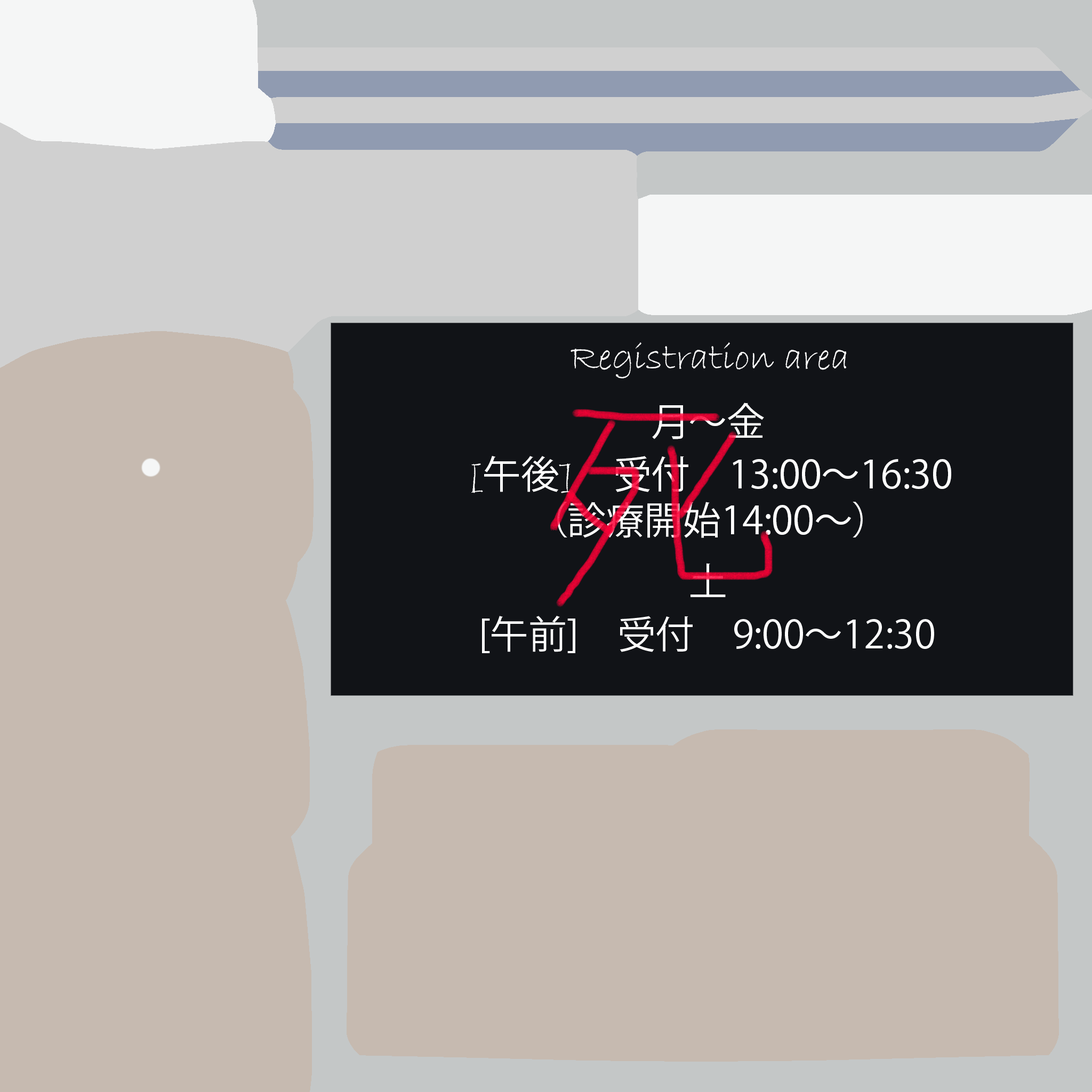
<style>
.page{position:relative;width:1092px;height:1092px;background:#c6bab0}
.page>*{position:absolute;margin:0}
.t1{font:38.4px "BradleyHandITC";color:#ffffff}
.t2{font:38.4px "KozGoPr6N-Regular";color:#ffffff}
</style>
<div class="page">
<p class="t1" style="left:571px;top:342px;width:276px;height:37px">Registration area</p>
<p class="t2" style="left:652px;top:403px;width:112px;height:36px">月～金</p>
<p class="t2" style="left:471px;top:456px;width:480px;height:82px;text-align:center"><span class="t1">[</span>午後<span class="t1">]</span>　受付　13:00～16:30<br>（診療開始14:00～）</p>
<p class="t2" style="left:690px;top:563px;width:36px;height:34px">土</p>
</div>
